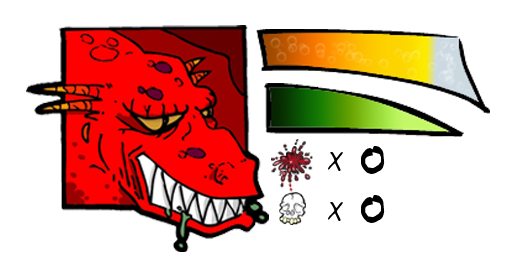
<style>
.page{position:relative;width:512px;height:256px;background:#ffffff}
.page>*{position:absolute;margin:0}
.t1{font:44.5px "Fiddlesticks";color:#000000}
.t2{font:29.6px "KimsHand";color:#000000}
</style>
<div class="page">
<p class="t1" style="left:361px;top:146px;width:24px;height:28px">0</p>
<p class="t2" style="left:328px;top:152px;width:15px;height:19px">X</p>
<p class="t1" style="left:361px;top:195px;width:24px;height:28px">0</p>
<p class="t2" style="left:328px;top:202px;width:15px;height:19px">X</p>
</div>
